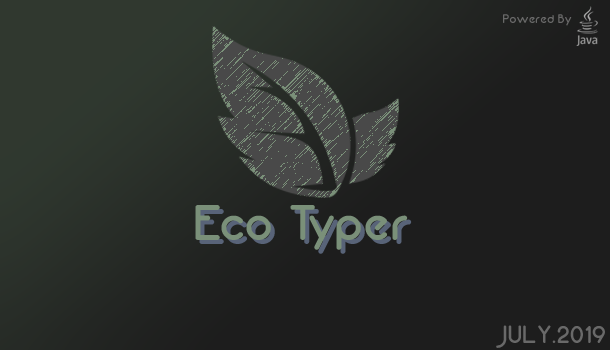
<style>
.page{position:relative;width:610px;height:350px;background:#1d1d1d}
.page>*{position:absolute;margin:0}
.t1{font:12.5px "Neon80s";color:#696969}
.t2{font:50px "Neon80s";color:#7a9079}
.t3{font:24.9px "Neon80s";color:#696969}
</style>
<div class="page">
<p class="t1" style="left:503px;top:14px;width:69px;height:12px">Powered By</p>
<p class="t2" style="left:195px;top:205px;width:213px;height:45px">Eco Typer</p>
<p class="t3" style="left:496px;top:325px;width:109px;height:23px">JULY.2019</p>
</div>
